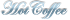
<style>
.page{position:relative;width:70px;height:20px;background:#ffffff}
.page>*{position:absolute;margin:0}
.t1{font:18px "EdwardianScrAltITCTTBold";letter-spacing:-0.005em;color:#6f8ea0;font-weight:bold}
</style>
<div class="page">
<p class="t1" style="left:1px;top:1px;width:66px;height:18px">HotCoffee</p>
</div>
